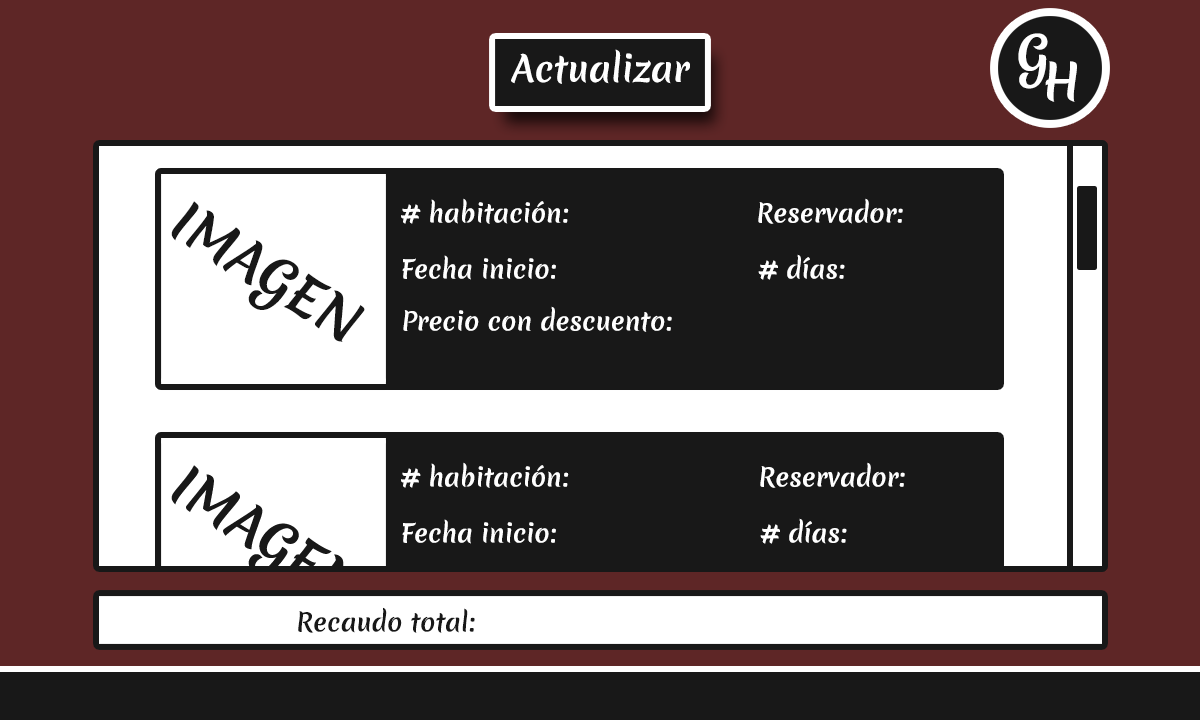
<style>
.page{position:relative;width:1200px;height:720px;background:#181818}
.page>*{position:absolute;margin:0}
.t1{font:48.4px "MeriendaOne-Regular";color:#ffffff}
.t2{font:35.1px "MeriendaOne-Regular";color:#ffffff}
.t3{font:24.6px "MeriendaOne-Regular";color:#ffffff}
.t4{font:51.9px "MeriendaOne-Regular";color:#181818}
.t5{font:24.6px "MeriendaOne-Regular";color:#181818}
</style>
<div class="page">
<p class="t1" style="left:1018px;top:33px;width:30px;height:56px">G</p>
<p class="t2" style="left:511px;top:49px;width:179px;height:35px">Actualizar</p>
<p class="t1" style="left:1045px;top:61px;width:32px;height:41px">H</p>
<p class="t3" style="left:401px;top:198px;width:168px;height:26px"># habitación:</p>
<p class="t3" style="left:758px;top:198px;width:145px;height:26px">Reservador:</p>
<p class="t4" style="left:171px;top:201px;width:194px;height:141px;rotate:32deg">IMAGEN</p>
<p class="t3" style="left:402px;top:255px;width:154px;height:25px">Fecha inicio:</p>
<p class="t3" style="left:758px;top:254px;width:87px;height:26px"># días:</p>
<p class="t3" style="left:403px;top:306px;width:269px;height:26px">Precio con descuento:</p>
<p class="t3" style="left:401px;top:462px;width:168px;height:26px"># habitación:</p>
<p class="t3" style="left:760px;top:462px;width:145px;height:26px">Reservador:</p>
<p class="t3" style="left:402px;top:519px;width:154px;height:25px">Fecha inicio:</p>
<p class="t3" style="left:760px;top:518px;width:87px;height:26px"># días:</p>
<p class="t5" style="left:298px;top:607px;width:177px;height:26px">Recaudo total:</p>
</div>
